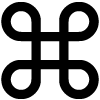
<style>
.page{position:relative;width:100px;height:100px;background:#ffffff}
.page>*{position:absolute;margin:0}
.t1{font:128px "LucidaGrande";color:#000000}
</style>
<div class="page">
<p class="t1" style="left:1px;top:2px;width:98px;height:97px">⌘</p>
</div>
